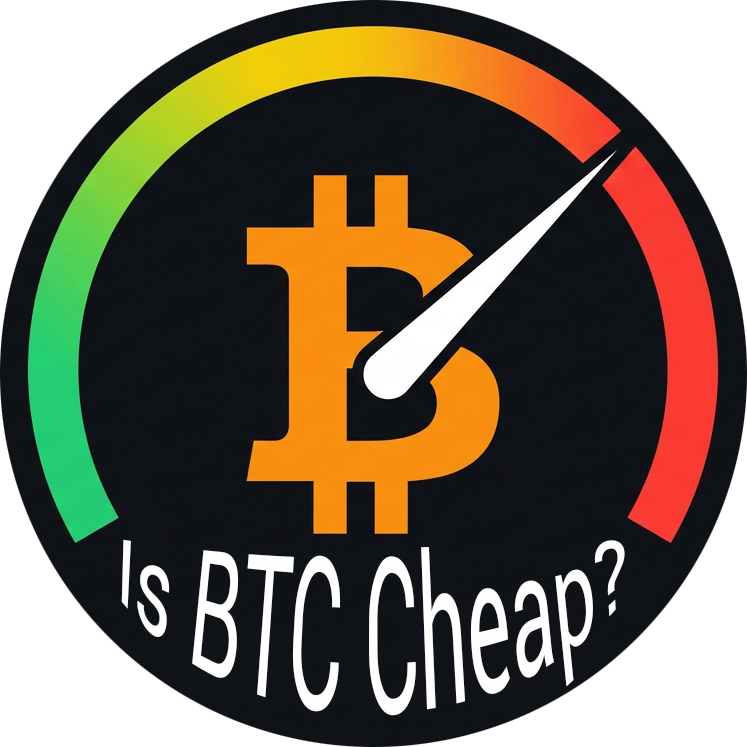
<style>
.page{position:relative;width:747px;height:747px;background:#0f1217}
.page>*{position:absolute;margin:0}
.t1{font:79.2px "Roboto-Regular";color:#fefefe}
</style>
<div class="page">
<p class="t1" style="left:121px;top:539px;width:504px;height:177px;text-align:center">Is BTC Cheap?</p>
</div>
